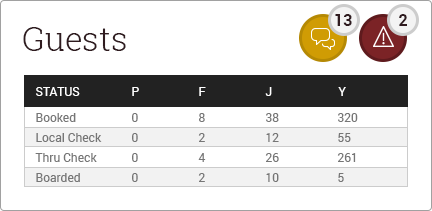
<style>
.page{position:relative;width:432px;height:211px;background:#ffffff}
.page>*{position:absolute;margin:0}
.t1{font:16px "Roboto-Bold";color:#2f1b1f}
.t2{font:33px "RobotoSlab-Light";color:#2f1b1f}
.t3{font:12px "Roboto-Regular";color:#ffffff;text-transform:uppercase}
.t4{font:12px "Roboto-Regular";color:#767676}
.t5{font:12px "Roboto-Regular";color:#767676;text-transform:uppercase}
</style>
<div class="page">
<p class="t1" style="left:335px;top:14px;width:17px;height:12px">13</p>
<p class="t1" style="left:399px;top:14px;width:8px;height:12px">2</p>
<p class="t2" style="left:23px;top:27px;width:103px;height:24px">Guests</p>
<p class="t3" style="left:36px;top:87px;width:44px;height:9px">Status</p>
<p class="t3" style="left:132px;top:87px;width:7px;height:9px">P</p>
<p class="t3" style="left:199px;top:87px;width:7px;height:9px">f</p>
<p class="t3" style="left:265px;top:87px;width:7px;height:9px">j</p>
<p class="t3" style="left:338px;top:87px;width:8px;height:9px">y</p>
<p class="t4" style="left:36px;top:113px;width:40px;height:9px">Booked</p>
<p class="t5" style="left:132px;top:113px;width:6px;height:9px">0</p>
<p class="t5" style="left:199px;top:113px;width:6px;height:9px">8</p>
<p class="t5" style="left:266px;top:113px;width:13px;height:9px">38</p>
<p class="t5" style="left:338px;top:113px;width:20px;height:9px">320</p>
<p class="t4" style="left:36px;top:133px;width:66px;height:9px">Local Check</p>
<p class="t5" style="left:132px;top:133px;width:6px;height:9px">0</p>
<p class="t5" style="left:198px;top:133px;width:7px;height:9px">2</p>
<p class="t5" style="left:266px;top:133px;width:13px;height:9px">12</p>
<p class="t5" style="left:338px;top:133px;width:13px;height:9px">55</p>
<p class="t4" style="left:35px;top:153px;width:62px;height:9px">Thru Check</p>
<p class="t5" style="left:132px;top:153px;width:6px;height:9px">0</p>
<p class="t5" style="left:198px;top:153px;width:8px;height:9px">4</p>
<p class="t5" style="left:265px;top:153px;width:14px;height:9px">26</p>
<p class="t5" style="left:337px;top:153px;width:19px;height:9px">261</p>
<p class="t4" style="left:36px;top:173px;width:44px;height:9px">Boarded</p>
<p class="t5" style="left:132px;top:173px;width:6px;height:9px">0</p>
<p class="t5" style="left:198px;top:173px;width:7px;height:9px">2</p>
<p class="t5" style="left:266px;top:173px;width:13px;height:9px">10</p>
<p class="t5" style="left:338px;top:173px;width:6px;height:9px">5</p>
</div>
